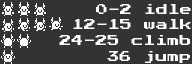
<style>
.page{position:relative;width:192px;height:64px;background:#333333}
.page>*{position:absolute;margin:0}
.t1{font:12px "PressStart2P-Regular";color:#feffff}
</style>
<div class="page">
<p class="t1" style="left:96px;top:4px;width:95px;height:10px">0-2 idle</p>
<p class="t1" style="left:73px;top:19px;width:118px;height:10px">12-15 walk</p>
<p class="t1" style="left:59px;top:35px;width:131px;height:10px">24-25 climb</p>
<p class="t1" style="left:107px;top:51px;width:83px;height:12px">36 jump</p>
</div>
